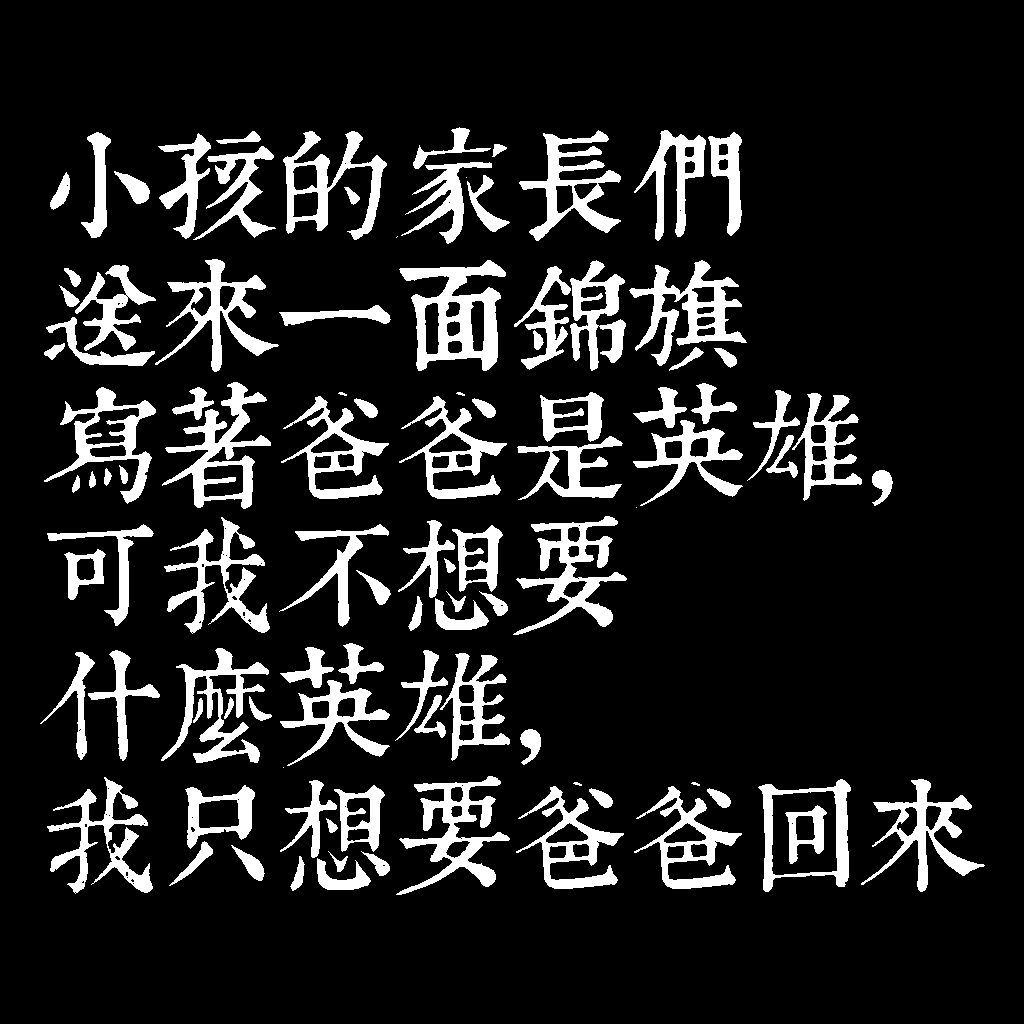
<style>
.page{position:relative;width:1024px;height:1024px;background:#000000}
.page>*{position:absolute;margin:0}
.t1{font:120px/130px "TpldKhangXiDictTrial";letter-spacing:-0.02em;color:#ffffff}
</style>
<div class="page">
<p class="t1" style="left:40px;top:127px;width:945px;height:768px">小孩的家長們<br>送來一面錦旗<br>寫著爸爸是英雄,<br>可我不想要<br>什麼英雄，<br>我只想要爸爸回來</p>
</div>
